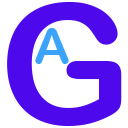
<style>
.page{position:relative;width:128px;height:128px;background:#ffffff}
.page>*{position:absolute;margin:0}
.t1{font:166.7px "ArialRoundedMTBold";color:#4e08ec}
.t2{font:50px "ArialRoundedMTBold";color:#3ca3fb}
</style>
<div class="page">
<p class="t1" style="left:7px;top:2px;width:115px;height:124px">G</p>
<p class="t2" style="left:35px;top:28px;width:34px;height:36px">A</p>
</div>
